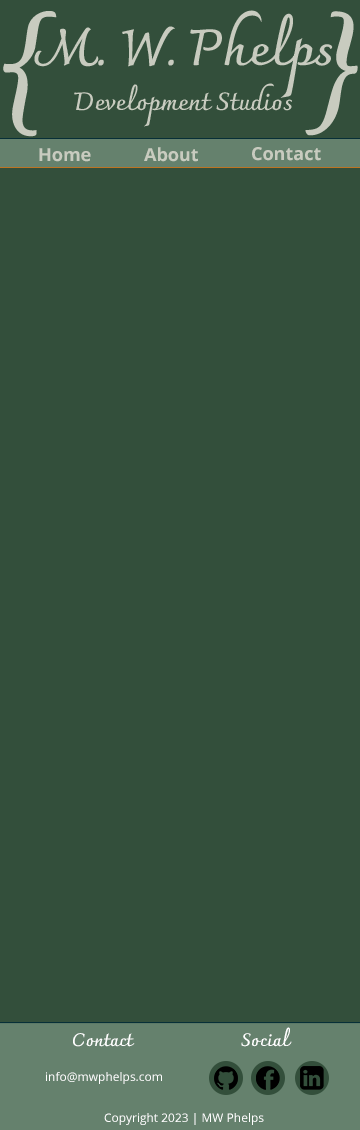
<style>
.page{position:relative;width:360px;height:1130px;background:#334f3b}
.page>*{position:absolute;margin:0}
.t1{font:18px "OpenSans-Bold";color:#c8cbbf}
.t2{font:18px "Charmonman-Bold";color:#ffffff}
.t3{font:12px "OpenSans";color:#ffffff}
</style>
<div class="page">
<p class="t1" style="left:39px;top:148px;width:52px;height:14px">Home</p>
<p class="t1" style="left:144px;top:147px;width:54px;height:15px">About</p>
<p class="t1" style="left:252px;top:147px;width:69px;height:14px">Contact</p>
<p class="t2" style="left:73px;top:1033px;width:62px;height:14px">Contact</p>
<p class="t2" style="left:241px;top:1027px;width:51px;height:20px">Social</p>
<p class="t3" style="left:46px;top:1072px;width:116px;height:12px">info@mwphelps.com</p>
<p class="t3" style="left:104px;top:1113px;width:160px;height:12px">Copyright 2023 | MW Phelps</p>
</div>
